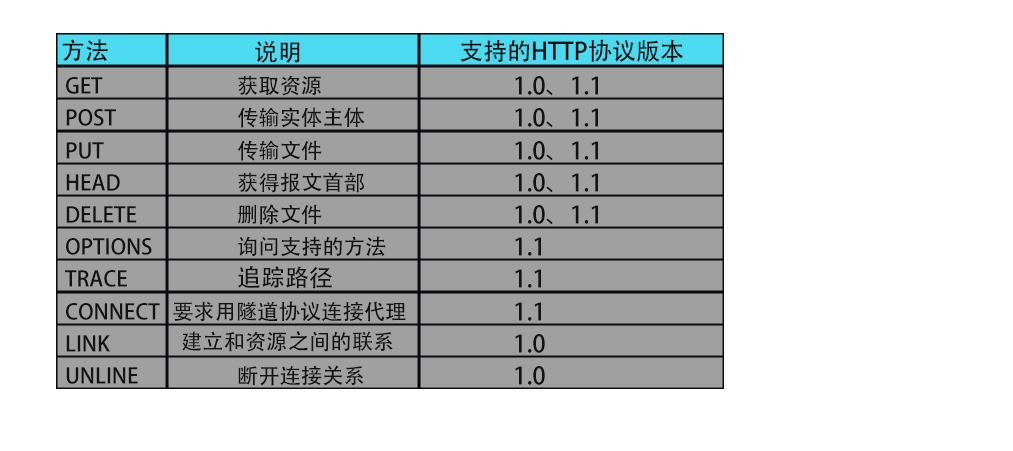
<style>
.page{position:relative;width:1013px;height:451px;background:#ffffff}
.page>*{position:absolute;margin:0}
.t1{font:24px "AdobeHeitiStd-Regular";color:#141212}
.t2{font:21.3px "AdobeHeitiStd-Regular";color:#141212}
</style>
<div class="page">
<p class="t1" style="left:62px;top:39px;width:46px;height:23px">方法</p>
<p class="t1" style="left:255px;top:40px;width:45px;height:23px">说明</p>
<p class="t1" style="left:460px;top:39px;width:224px;height:24px">支持的HTTP协议版本</p>
<p class="t2" style="left:66px;top:77px;width:37px;height:17px">GET</p>
<p class="t2" style="left:238px;top:75px;width:83px;height:21px">获取资源</p>
<p class="t1" style="left:515px;top:76px;width:83px;height:20px">1.0、1.1</p>
<p class="t2" style="left:66px;top:109px;width:50px;height:17px">POST</p>
<p class="t2" style="left:237px;top:107px;width:128px;height:21px">传输实体主体</p>
<p class="t1" style="left:515px;top:108px;width:83px;height:20px">1.0、1.1</p>
<p class="t2" style="left:66px;top:142px;width:38px;height:17px">PUT</p>
<p class="t2" style="left:237px;top:140px;width:85px;height:21px">传输文件</p>
<p class="t1" style="left:515px;top:141px;width:83px;height:20px">1.0、1.1</p>
<p class="t2" style="left:66px;top:174px;width:54px;height:17px">HEAD</p>
<p class="t2" style="left:238px;top:172px;width:126px;height:21px">获得报文首部</p>
<p class="t1" style="left:515px;top:173px;width:83px;height:20px">1.0、1.1</p>
<p class="t2" style="left:66px;top:206px;width:71px;height:17px">DELETE</p>
<p class="t2" style="left:238px;top:204px;width:84px;height:21px">删除文件</p>
<p class="t1" style="left:515px;top:205px;width:83px;height:20px">1.0、1.1</p>
<p class="t2" style="left:66px;top:238px;width:86px;height:17px">OPTIONS</p>
<p class="t2" style="left:238px;top:236px;width:148px;height:21px">询问支持的方法</p>
<p class="t1" style="left:515px;top:237px;width:26px;height:19px">1.1</p>
<p class="t2" style="left:65px;top:270px;width:62px;height:17px">TRACE</p>
<p class="t1" style="left:238px;top:266px;width:94px;height:23px">追踪路径</p>
<p class="t1" style="left:515px;top:269px;width:26px;height:19px">1.1</p>
<p class="t2" style="left:66px;top:303px;width:94px;height:17px">CONNECT</p>
<p class="t2" style="left:173px;top:301px;width:233px;height:21px">要求用隧道协议连接代理</p>
<p class="t1" style="left:515px;top:302px;width:26px;height:19px">1.1</p>
<p class="t2" style="left:66px;top:335px;width:44px;height:17px">LINK</p>
<p class="t2" style="left:182px;top:331px;width:211px;height:21px">建立和资源之间的联系</p>
<p class="t1" style="left:515px;top:334px;width:30px;height:19px">1.0</p>
<p class="t2" style="left:238px;top:365px;width:126px;height:21px">断开连接关系</p>
<p class="t1" style="left:515px;top:366px;width:30px;height:19px">1.0</p>
<p class="t2" style="left:66px;top:367px;width:72px;height:17px">UNLINE</p>
</div>
